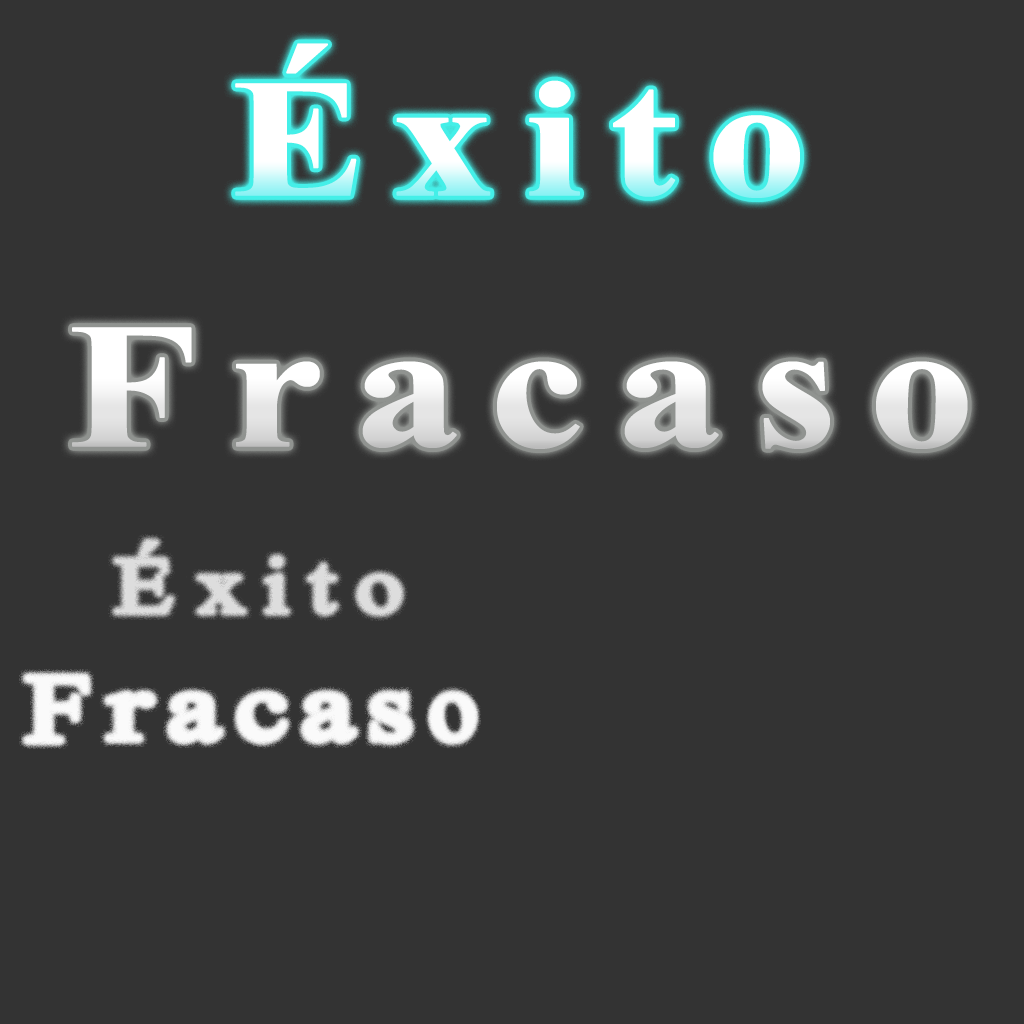
<style>
.page{position:relative;width:1024px;height:1024px;background:#333333}
.page>*{position:absolute;margin:0}
.t1{font:167.7px "TimesNewRomanPS-BoldMT";letter-spacing:0.14em;color:#f8ffff;font-weight:bold;scale:1.19 1}
.t2{font:178.3px "TimesNewRomanPS-BoldMT";letter-spacing:0.14em;font-weight:bold;scale:1.18 1}
</style>
<div class="page">
<p class="t1" style="left:235px;top:43px;width:565px;height:155px">Éxito</p>
<p class="t2" style="left:72px;top:327px;width:896px;height:122px">Fracaso</p>
</div>
